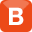
<style>
.page{position:relative;width:32px;height:32px;background:#ec4918}
.page>*{position:absolute;margin:0}
.t1{font:24px "HelveticaNeue-Bold";letter-spacing:-0.01em;color:#ffffff}
</style>
<div class="page">
<p class="t1" style="left:9px;top:7px;width:15px;height:18px">B</p>
</div>
